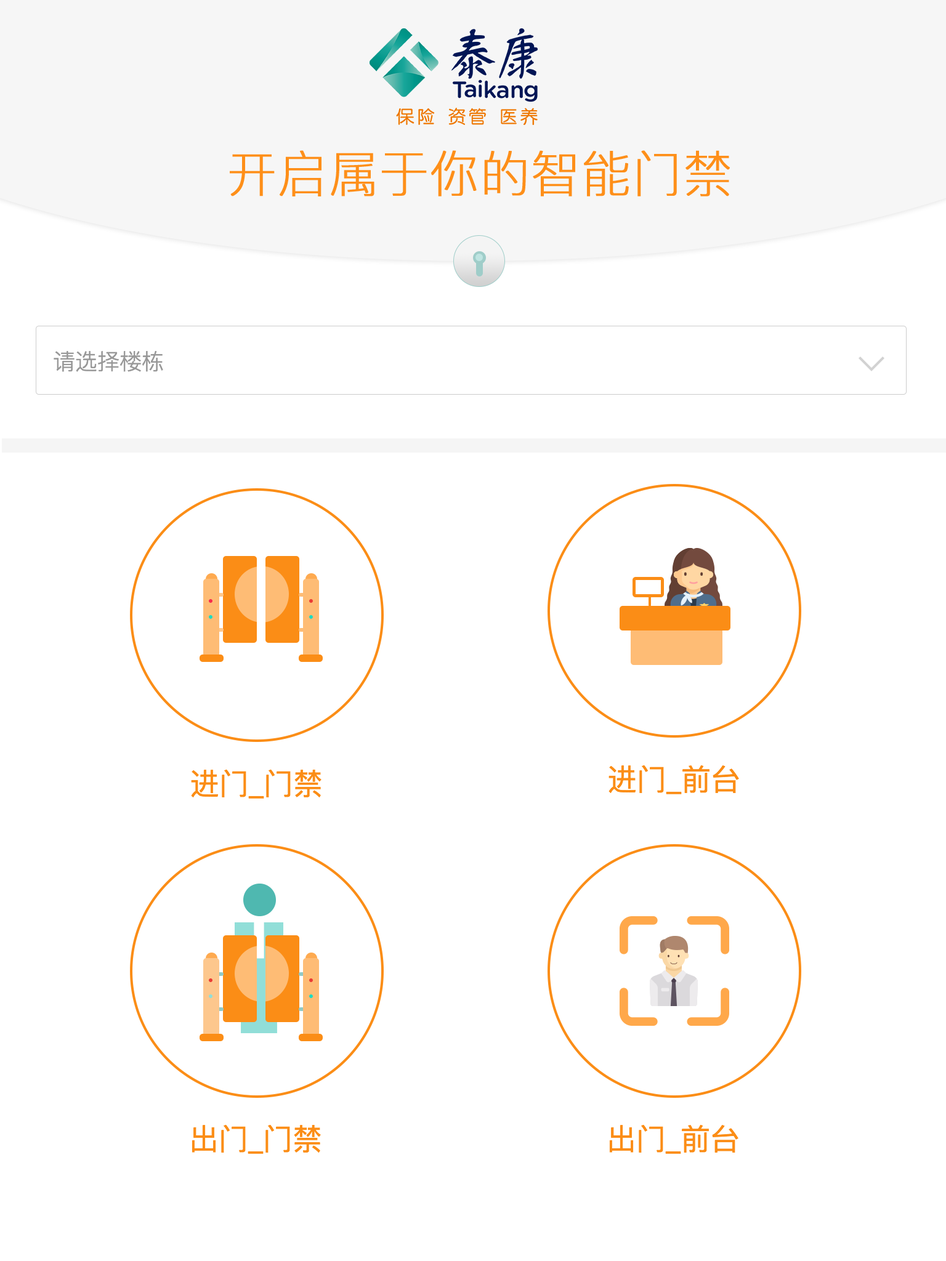
<style>
.page{position:relative;width:946px;height:1261px;background:#ffffff}
.page>*{position:absolute;margin:0}
.t1{font:49.3px "PingFangSC-Thin";color:#fe8f19;font-weight:bold}
.t2{font:22.2px "PingFangSC-Light";color:#999999}
.t3{font:29.6px "PingFangSC-Regular";color:#fb8d16}
</style>
<div class="page">
<p class="t1" style="left:230px;top:150px;width:500px;height:46px">开启属于你的智能门禁</p>
<p class="t2" style="left:54px;top:351px;width:109px;height:21px">请选择楼栋</p>
<p class="t3" style="left:191px;top:769px;width:130px;height:30px">进门_门禁</p>
<p class="t3" style="left:608px;top:765px;width:131px;height:29px">进门_前台</p>
<p class="t3" style="left:191px;top:1124px;width:130px;height:30px">出门_门禁</p>
<p class="t3" style="left:609px;top:1124px;width:129px;height:30px">出门_前台</p>
</div>
